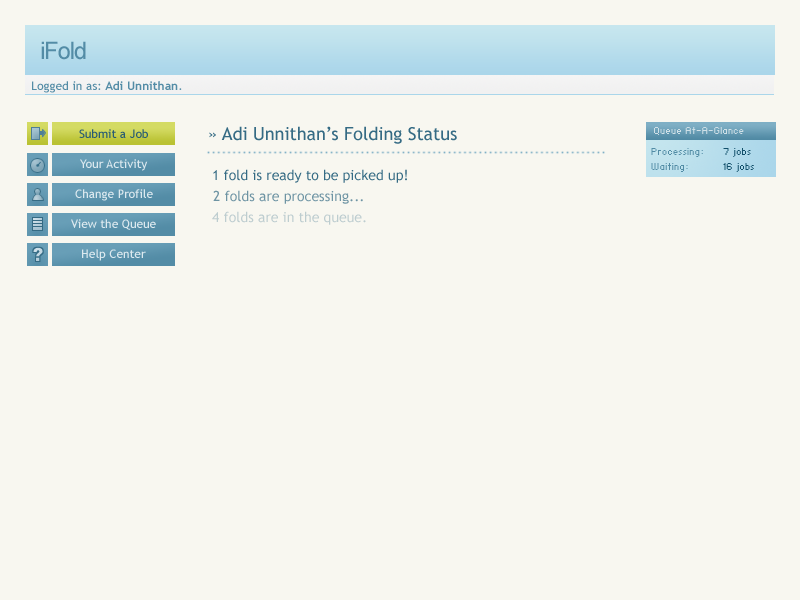
<style>
.page{position:relative;width:800px;height:600px;background:#f8f7f0}
.page>*{position:absolute;margin:0}
.t1{font:24px "ArialMT";letter-spacing:-0.05em;color:#538ca6}
.t2{font:12px "TrebuchetMS";color:#538ca6}
.t3{font:12px "TrebuchetMS-Bold";color:#538ca6}
.t4{font:18px "TrebuchetMS";color:#356b84}
.t5{font:12px "TrebuchetMS";color:#285b73}
.t6{font:14px "HaxrCorp 4088";color:#cfe0e7}
.t7{font:14px "HaxrCorp 4088";color:#528ca5}
.t8{font:14px "HaxrCorp 4088";color:#124f6a}
.t9{font:12px "TrebuchetMS";color:#dce9ef}
.t10{font:14px "TrebuchetMS";color:#356b84}
.t11{font:14px "TrebuchetMS";color:#6e94a3}
.t12{font:14px "TrebuchetMS";color:#bdcdcf}
</style>
<div class="page">
<p class="t1" style="left:41px;top:41px;width:45px;height:19px">iFold</p>
<p class="t2" style="left:32px;top:81px;width:150px;height:12px">Logged in as: <span class="t3">Adi Unnithan</span>.</p>
<p class="t4" style="left:209px;top:126px;width:248px;height:18px">» Adi Unnithan’s Folding Status</p>
<p class="t5" style="left:79px;top:129px;width:69px;height:9px">Submit a Job</p>
<p class="t6" style="left:654px;top:127px;width:90px;height:8px">Queue At-A-Glance</p>
<p class="t7" style="left:651px;top:148px;width:100px;height:9px">Processing:  <span class="t8">7 jobs</span></p>
<p class="t9" style="left:80px;top:159px;width:68px;height:12px">Your Activity</p>
<p class="t10" style="left:213px;top:169px;width:194px;height:14px">1 fold is ready to be picked up!</p>
<p class="t7" style="left:651px;top:163px;width:103px;height:9px">Waiting:  <span class="t8">16 jobs</span></p>
<p class="t9" style="left:75px;top:189px;width:78px;height:12px">Change Profile</p>
<p class="t11" style="left:213px;top:190px;width:150px;height:14px">2 folds are processing...</p>
<p class="t9" style="left:71px;top:219px;width:85px;height:11px">View the Queue</p>
<p class="t12" style="left:212px;top:211px;width:154px;height:14px">4 folds are in the queue.</p>
<p class="t9" style="left:82px;top:249px;width:64px;height:12px">Help Center</p>
</div>
